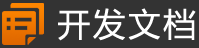
<style>
.page{position:relative;width:199px;height:48px;background:#333333}
.page>*{position:absolute;margin:0}
.t1{font:32.6px "MicrosoftYaHei";letter-spacing:0.08em;color:#ffffff}
</style>
<div class="page">
<p class="t1" style="left:58px;top:8px;width:138px;height:33px">开发文档</p>
</div>
